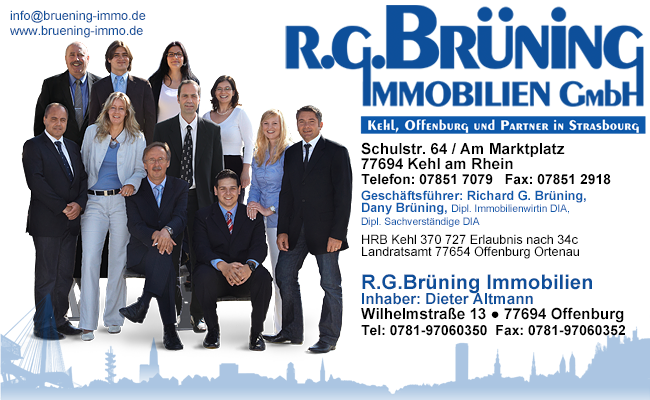
<style>
.page{position:relative;width:650px;height:400px;background:#ffffff}
.page>*{position:absolute;margin:0}
.t1{font:12.7px "ArialMT";color:#0e4f9a}
.t2{font:10.2px/12.7px "ArialMT";color:#0d59ab}
.t3{font:15.2px/15.2px "Arial-BoldMT";color:#000000}
.t4{font:14px/15.2px "Arial-BoldMT";color:#000000}
.t5{font:12.7px/15.2px "Arial-BoldMT";color:#0d59ab}
.t6{font:12.7px/12.7px "Arial-BoldMT";color:#0d59ab}
.t7{font:12.7px/12.7px "ArialMT";color:#000000}
.t8{font:10.2px/10.2px "ArialMT";color:#000000}
.t9{font:20.3px/15.2px "Arial-BoldMT";color:#0e4f9a}
.t10{font:15.2px/15.2px "Arial-BoldMT";color:#0d4f9a}
</style>
<div class="page">
<p class="t1" style="left:10px;top:10px;width:136px;height:28px">info@bruening-immo.de <br>www.bruening-immo.de</p>
<p class="t2" style="left:361px;top:142px;width:250px;height:85px"><span class="t3">Schulstr. 64 / Am Marktplatz<br>77694 Kehl am Rhein <br></span><span class="t4">Telefon: 07851 7079   Fax: 07851 2918<br></span><span class="t5">Geschäftsführer: Richard G. Brüning, <br></span><span class="t6">Dany Brüning, </span>Dipl. Immobilienwirtin DIA,<br>Dipl. Sachverständige DIA</p>
<p class="t7" style="left:362px;top:234px;width:217px;height:25px"><span class="t8"><br></span>HRB Kehl 370 727 Erlaubnis nach 34c<br>Landratsamt 77654 Offenburg Ortenau</p>
<p class="t4" style="left:361px;top:274px;width:264px;height:62px"><span class="t9">R.G.Brüning Immobilien<br></span><span class="t10">Inhaber: Dieter Altmann<br></span><span class="t3">Wilhelmstraße 13 ● 77694 Offenburg<br></span>Tel: 0781-97060350  Fax: 0781-97060352</p>
</div>
